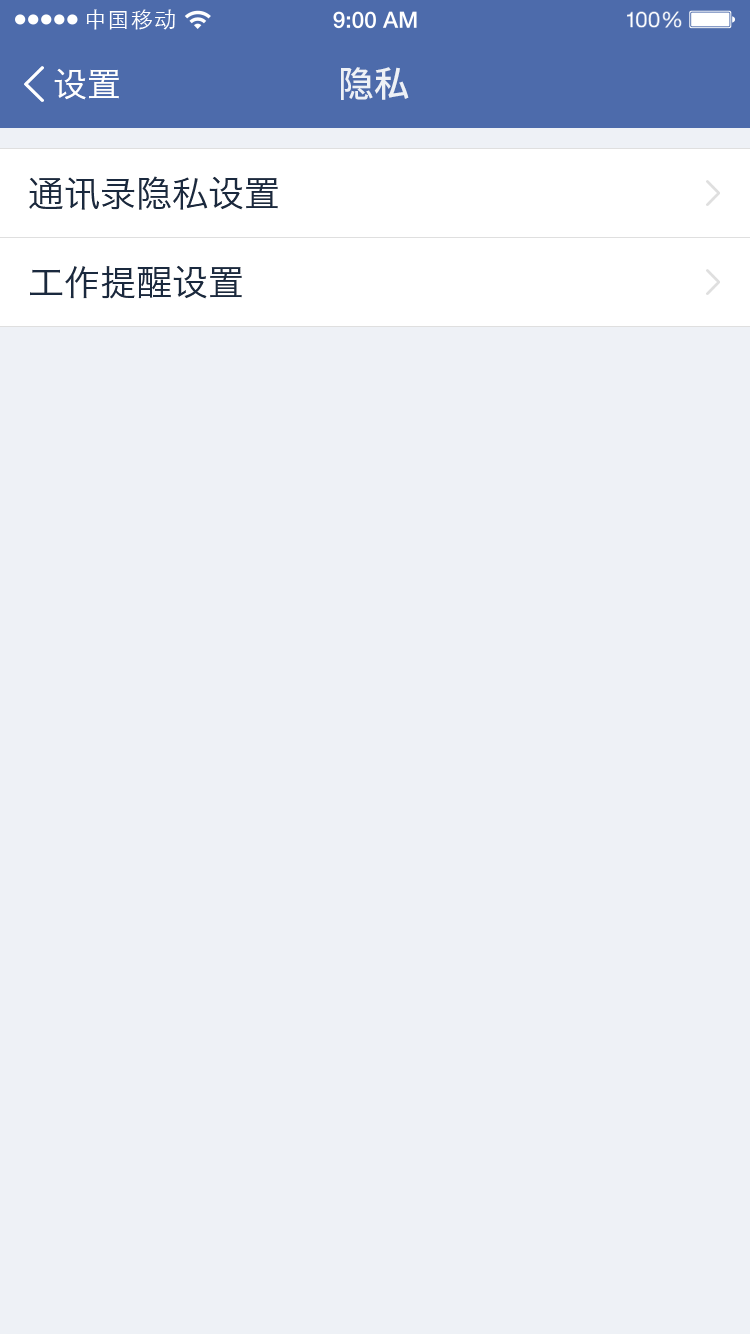
<style>
.page{position:relative;width:750px;height:1334px;background:#eef1f6}
.page>*{position:absolute;margin:0}
.t1{font:21.9px "STXihei";letter-spacing:0.04em;color:#ffffff}
.t2{font:34px "HiraginoSansGB-W3";color:#ffffff}
.t3{font:36px "NotoSansHans-Medium";color:#eef1f6}
.t4{font:36px "HiraginoSansGB-W3";color:#1a293e}
</style>
<div class="page">
<p class="t1" style="left:86px;top:9px;width:89px;height:21px">中国移动</p>
<p class="t2" style="left:54px;top:68px;width:65px;height:32px">设置</p>
<p class="t3" style="left:341px;top:67px;width:68px;height:33px">隐私</p>
<p class="t4" style="left:29px;top:176px;width:249px;height:34px">通讯录隐私设置</p>
<p class="t4" style="left:30px;top:265px;width:212px;height:34px">工作提醒设置</p>
</div>
